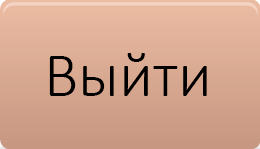
<style>
.page{position:relative;width:260px;height:149px}
.page>*{position:absolute;margin:0}
.t1{font:64px "Calibri-Light";color:#000000}
</style>
<div class="page">
<p class="t1" style="left:49px;top:53px;width:158px;height:43px">Выйти</p>
</div>
